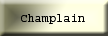
<style>
.page{position:relative;width:108px;height:36px}
.page>*{position:absolute;margin:0}
.t1{font:12px "Courier";color:#000000}
</style>
<div class="page">
<p class="t1" style="left:21px;top:14px;width:64px;height:10px">Champlain</p>
</div>
